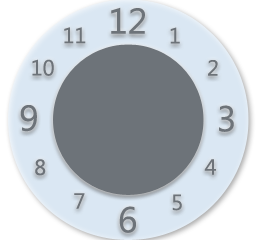
<style>
.page{position:relative;width:256px;height:240px;background:#6d7379}
.page>*{position:absolute;margin:0}
.t1{font:36px "Gisha";color:#6d7379}
.t2{font:22px "Gisha";color:#6d7379}
</style>
<div class="page">
<p class="t1" style="left:111px;top:7px;width:34px;height:27px">12</p>
<p class="t2" style="left:64px;top:27px;width:22px;height:17px">11</p>
<p class="t2" style="left:170px;top:27px;width:10px;height:17px">1</p>
<p class="t2" style="left:32px;top:59px;width:22px;height:17px">10</p>
<p class="t2" style="left:208px;top:60px;width:10px;height:16px">2</p>
<p class="t1" style="left:20px;top:105px;width:17px;height:27px">9</p>
<p class="t1" style="left:219px;top:105px;width:15px;height:27px">3</p>
<p class="t2" style="left:35px;top:159px;width:11px;height:17px">8</p>
<p class="t2" style="left:204px;top:159px;width:12px;height:16px">4</p>
<p class="t2" style="left:74px;top:193px;width:11px;height:16px">7</p>
<p class="t2" style="left:172px;top:194px;width:10px;height:17px">5</p>
<p class="t1" style="left:119px;top:206px;width:17px;height:27px">6</p>
</div>
